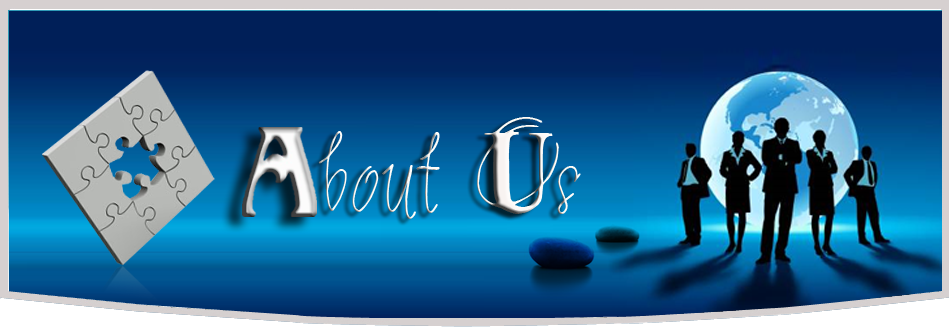
<style>
.page{position:relative;width:949px;height:327px}
.page>*{position:absolute;margin:0}
.t1{font:97.6px "2PeasBallerina";color:#f8f3f1;scale:0.83 1}
</style>
<div class="page">
<p class="t1" style="left:318px;top:117px;width:263px;height:102px">bout Us</p>
</div>
